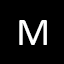
<style>
.page{position:relative;width:64px;height:64px;background:#000000}
.page>*{position:absolute;margin:0}
.t1{font:40px "Calibri";color:#feffff}
</style>
<div class="page">
<p class="t1" style="left:19px;top:20px;width:28px;height:25px">M</p>
</div>
